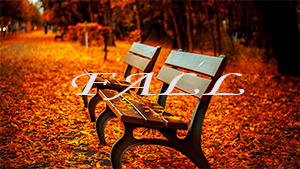
<style>
.page{position:relative;width:300px;height:169px}
.page>*{position:absolute;margin:0}
.t1{font:38.6px "MonotypeCorsiva";color:#e6e2e7;scale:1.98 1}
</style>
<div class="page">
<p class="t1" style="left:71px;top:72px;width:174px;height:28px">FALL</p>
</div>
